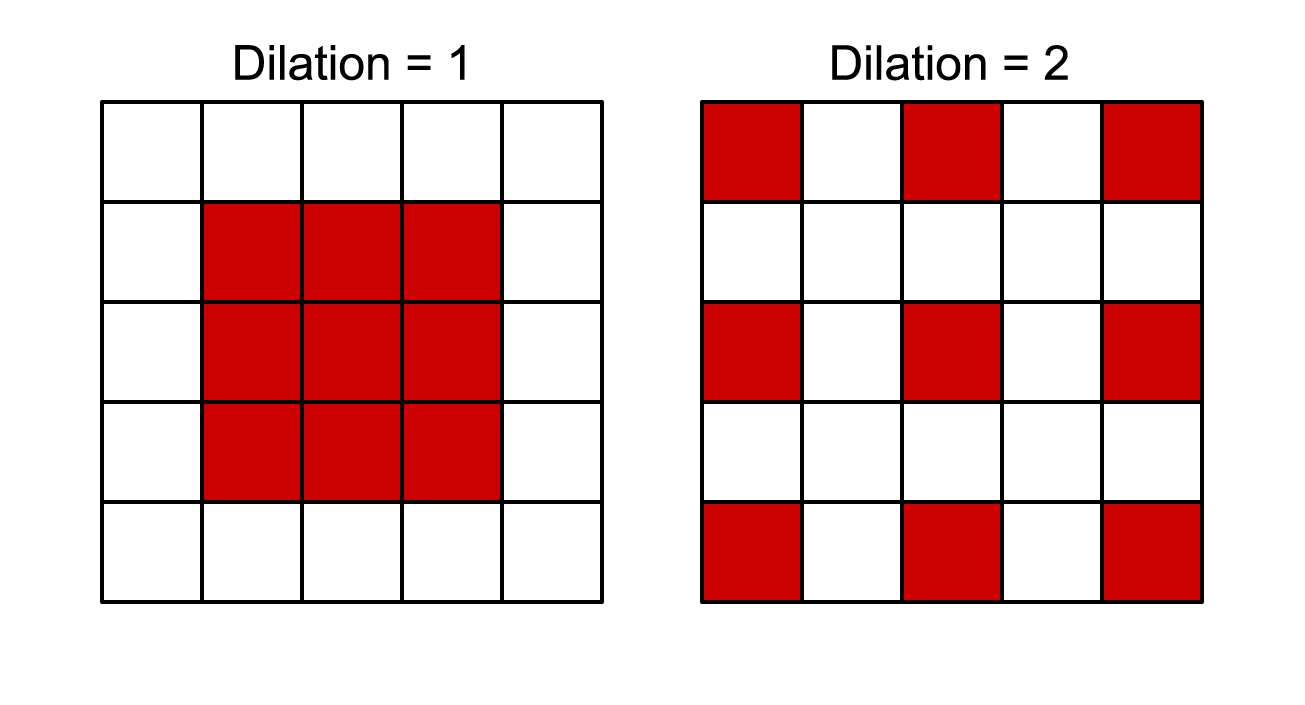
<style>
.page{position:relative;width:1305px;height:705px;background:#ffffff}
.page>*{position:absolute;margin:0}
.t1{font:48px "ArialMT";color:#000000}
</style>
<div class="page">
<p class="t1" style="left:235px;top:45px;width:230px;height:36px">Dilation = 1</p>
<p class="t1" style="left:832px;top:45px;width:236px;height:36px">Dilation = 2</p>
</div>
